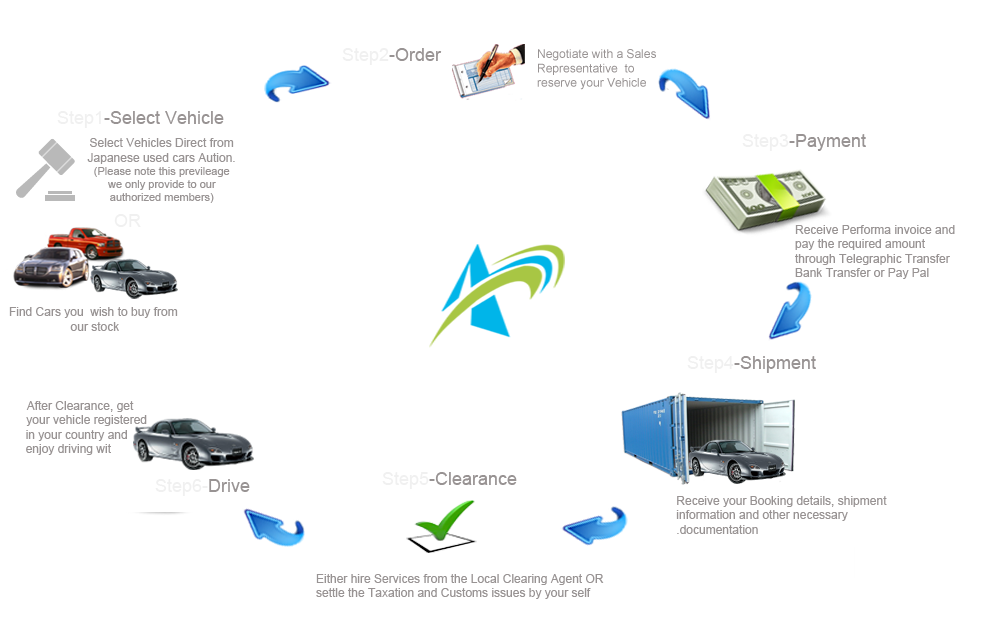
<style>
.page{position:relative;width:1000px;height:632px;background:#ffffff}
.page>*{position:absolute;margin:0}
.t1{font:18px "ArialMT";color:#989393}
.t2{font:18px "ArialMT";color:#f0f0f0}
.t3{font:12px "ArialMT";color:#989393}
.t4{font:11px "ArialMT";color:#989393}
</style>
<div class="page">
<p class="t1" style="left:342px;top:48px;width:100px;height:17px"><span class="t2">Step2</span>-Order</p>
<p class="t3" style="left:537px;top:49px;width:119px;height:41px">Negotiate with a Sales <br>      Representative  to<br>      reserve your Vehicle</p>
<p class="t1" style="left:57px;top:111px;width:167px;height:17px"><span class="t2">Step1</span>-Select Vehicle</p>
<p class="t1" style="left:742px;top:134px;width:124px;height:17px"><span class="t2">Step3</span>-Payment</p>
<p class="t4" style="left:87px;top:138px;width:148px;height:65px;text-align:center"><span class="t3">Select Vehicles Direct from <br>Japanese used cars Aution. <br></span>(Please note this previleage <br>we only provide to our <br>authorized members)</p>
<p class="t2" style="left:114px;top:214px;width:27px;height:13px">OR</p>
<p class="t3" style="left:795px;top:225px;width:160px;height:54px;text-align:right">Receive Performa invoice and<br>pay the required amount<br>through Telegraphic Transfer<br> Bank Transfer or Pay Pal</p>
<p class="t3" style="left:9px;top:307px;width:169px;height:24px;text-align:center">Find Cars you  wish to buy from<br> our stock</p>
<p class="t1" style="left:687px;top:356px;width:129px;height:17px"><span class="t2">Step4</span>-Shipment</p>
<p class="t3" style="left:26px;top:401px;width:121px;height:54px;text-align:center">After Clearance, get <br>          your vehicle registered<br>     in your country and <br>enjoy driving wit</p>
<p class="t1" style="left:382px;top:472px;width:135px;height:17px"><span class="t2">Step5</span>-Clearance</p>
<p class="t2" style="left:155px;top:479px;width:95px;height:17px">Step6-<span class="t1">Drive</span></p>
<p class="t3" style="left:676px;top:496px;width:211px;height:38px;text-align:right">Receive your Booking details, shipment <br>information and other necessary <br>documentation.</p>
<p class="t3" style="left:316px;top:574px;width:288px;height:25px;text-align:right">Either hire Services from the Local Clearing Agent OR<br> settle the Taxation and Customs issues by your self</p>
</div>
